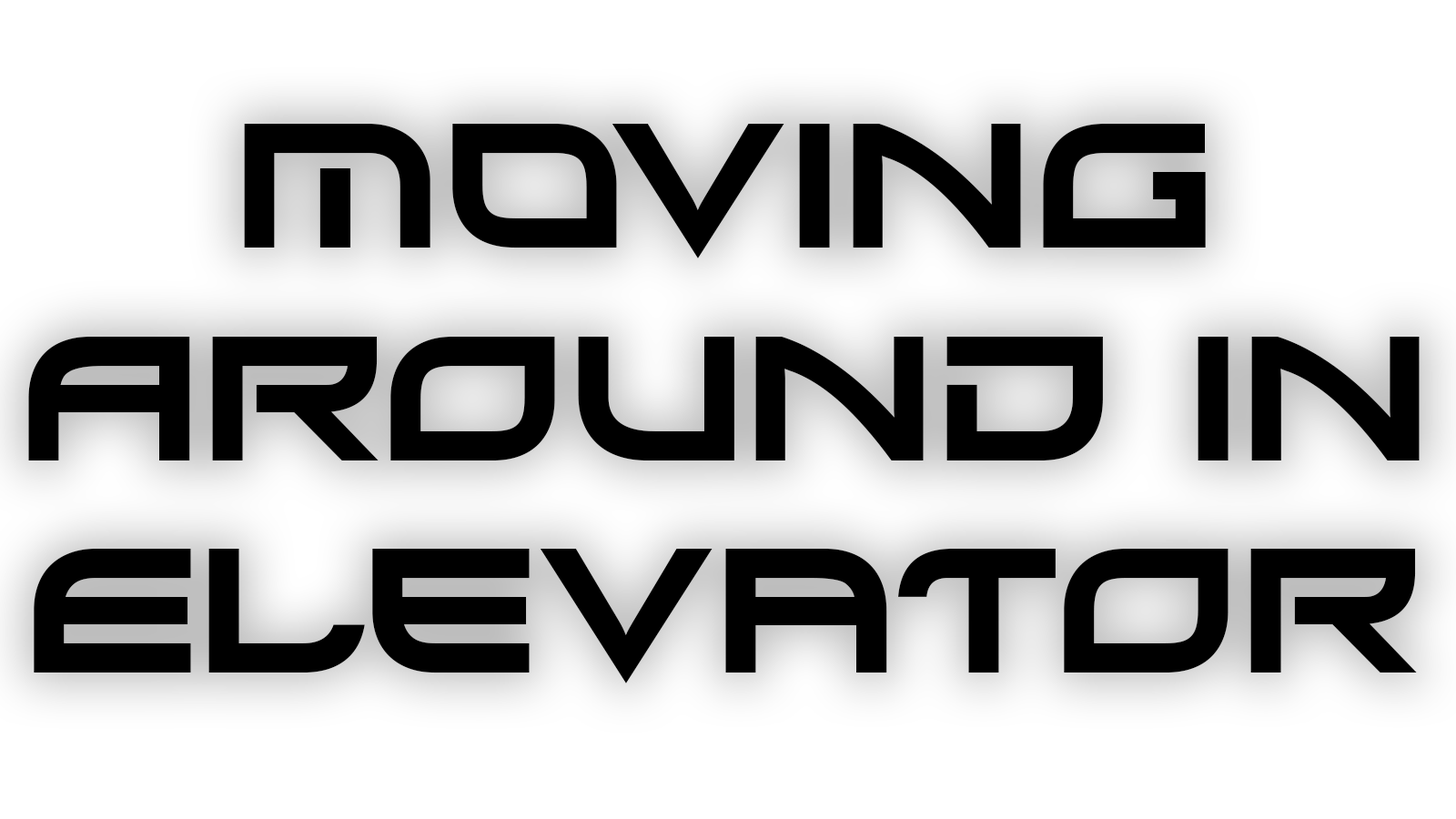
<style>
.page{position:relative;width:1456px;height:819px;background:#ffffff}
.page>*{position:absolute;margin:0}
.t1{font:176.9px "Xirod-Regular";color:#000000}
</style>
<div class="page">
<p class="t1" style="left:28px;top:124px;width:1392px;height:559px;text-align:center">Moving<br>around in<br>elevator</p>
</div>
